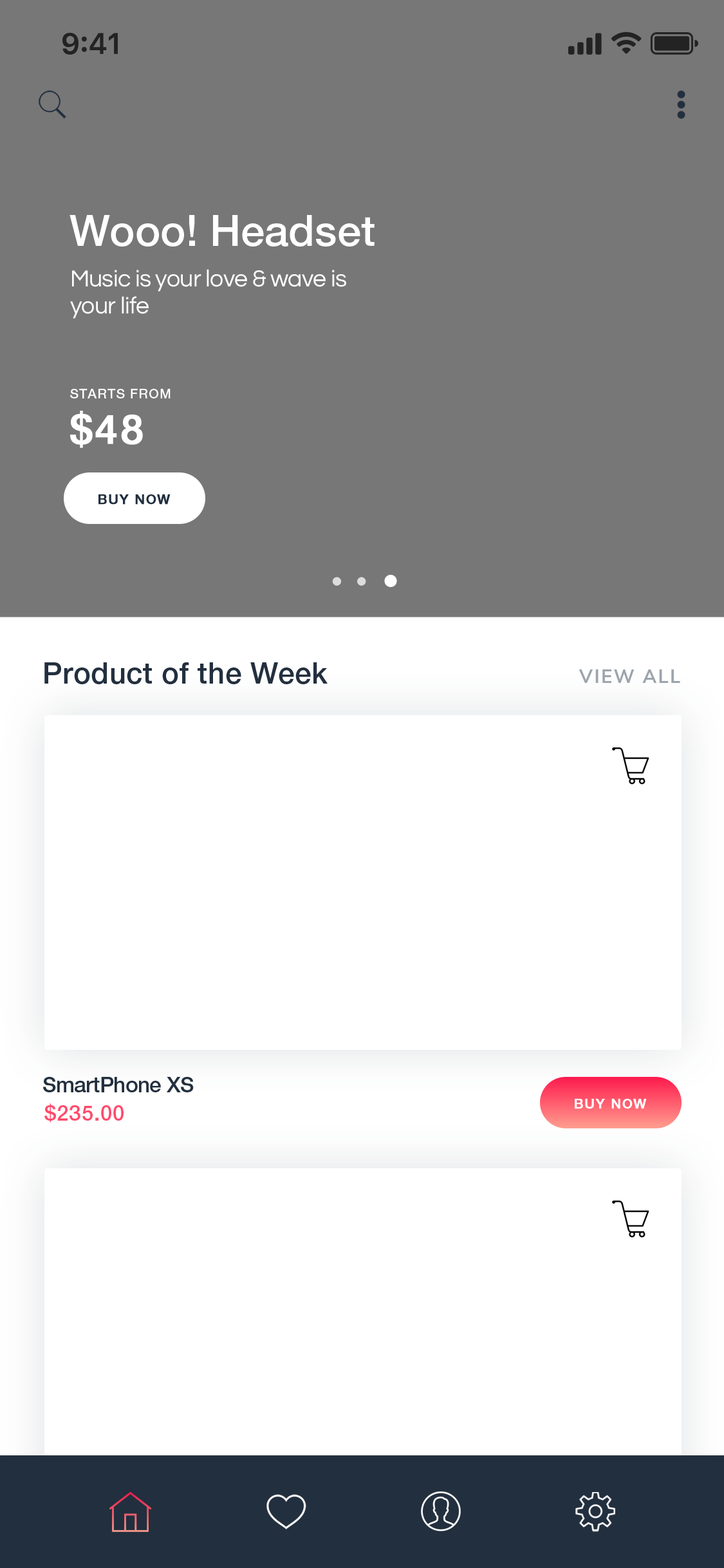
<style>
.page{position:relative;width:724px;height:1568px;background:#ffffff}
.page>*{position:absolute;margin:0}
.t1{font:42.9px "HelveticaNeue-Medium";color:#ffffff}
.t2{font:24.1px/26.8px "Questrial-Regular";letter-spacing:-0.02em;color:#ffffff}
.t3{font:13.4px "HelveticaNeue-Medium";letter-spacing:0.05em;color:#ffffff}
.t4{font:40.2px "HelveticaNeue-Medium";letter-spacing:0.05em;color:#ffffff;font-weight:bold}
.t5{font:13.4px "HelveticaNeue-Medium";letter-spacing:0.08em;color:#222f3e;font-weight:bold}
.t6{font:29.5px "HelveticaNeue-Medium";letter-spacing:0.01em;color:#222f3e}
.t7{font:18.8px "NunitoSans-Bold";letter-spacing:0.08em;color:#9ca4ad}
.t8{font:21.5px "HelveticaNeue-Medium";letter-spacing:-0.02em;color:#222f3e}
.t9{font:21.5px "HelveticaNeue-Medium";letter-spacing:0.02em;color:#ff4b6c;text-transform:uppercase}
.t10{font:13.4px "HelveticaNeue-Medium";letter-spacing:0.08em;color:#ffffff;font-weight:bold}
</style>
<div class="page">
<p class="t1" style="left:70px;top:215px;width:305px;height:32px">Wooo! Headset</p>
<p class="t2" style="left:70px;top:269px;width:276px;height:50px">Music is your love &amp; wave is<br>your life</p>
<p class="t3" style="left:70px;top:389px;width:101px;height:9px">STARTS FROM</p>
<p class="t4" style="left:70px;top:411px;width:73px;height:37px">$48</p>
<p class="t5" style="left:98px;top:494px;width:73px;height:11px">BUY NOW</p>
<p class="t6" style="left:44px;top:662px;width:284px;height:22px">Product of the Week</p>
<p class="t7" style="left:579px;top:669px;width:101px;height:14px">VIEW ALL</p>
<p class="t8" style="left:43px;top:1077px;width:151px;height:15px">SmartPhone XS</p>
<p class="t9" style="left:44px;top:1103px;width:80px;height:20px">$235.00</p>
<p class="t10" style="left:575px;top:1099px;width:72px;height:10px">BUY NOW</p>
</div>
